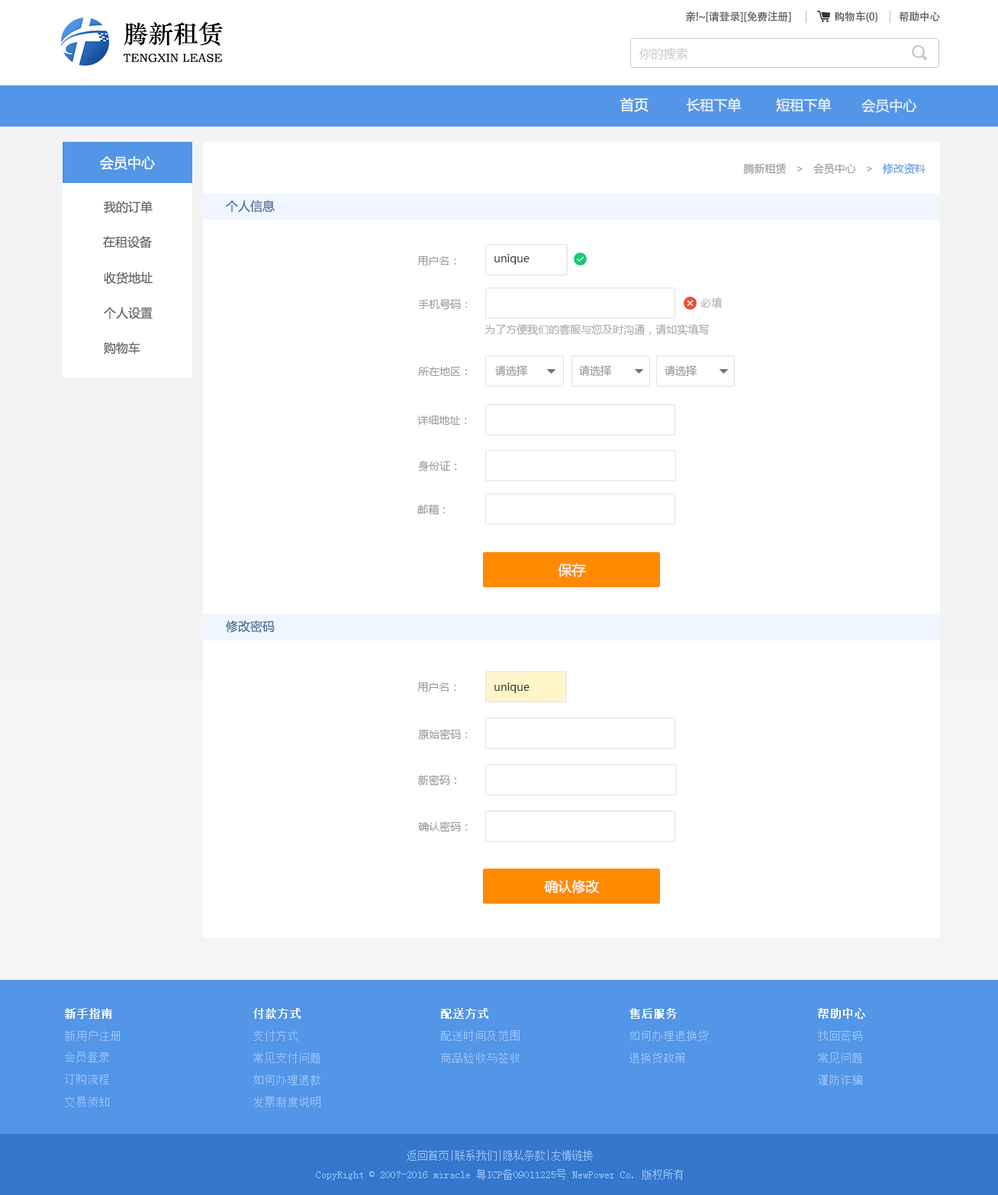
<style>
.page{position:relative;width:998px;height:1195px;background:#ffffff}
.page>*{position:absolute;margin:0}
.t1{font:10.7px "AdobeHeitiStd-Regular";letter-spacing:-0.02em;color:#666666}
.t2{font:24.9px "STZhongsong";color:#000000}
.t3{font:11.8px "STZhongsong";color:#000000}
.t4{font:12.2px "MicrosoftYaHei";color:#c9caca}
.t5{font:14.3px "MicrosoftYaHei";color:#ffffff}
.t6{font:13.7px "MicrosoftYaHei";color:#eaf3ff}
.t7{font:13.7px "MicrosoftYaHei";color:#fefefe}
.t8{font:10.7px "MicrosoftYaHei";color:#999999}
.t9{font:10.7px "MicrosoftYaHei";color:#5395e7}
.t10{font:12.2px "MicrosoftYaHei";color:#666666}
.t11{font:12.2px "MicrosoftYaHei";color:#4d719d}
.t12{font:10.7px "MicrosoftYaHei";color:#333333}
.t13{font:10.7px "MicrosoftYaHei";color:#aaaaaa}
.t14{font:13.7px "MicrosoftYaHei";color:#fffefe}
.t15{font:11.4px "SimSun";color:#ffffff;font-weight:bold}
.t16{font:11.4px "SimSun";color:#9ec8fd}
.t17{font:10.7px "SimSun";color:#9ec8fd}
</style>
<div class="page">
<p class="t1" style="left:686px;top:11px;width:105px;height:11px">亲!~[请登录][免费注册]</p>
<p class="t1" style="left:834px;top:11px;width:43px;height:11px">购物车(0)</p>
<p class="t1" style="left:899px;top:11px;width:41px;height:11px">帮助中心</p>
<p class="t2" style="left:124px;top:21px;width:99px;height:25px">腾新租赁</p>
<p class="t3" style="left:123px;top:53px;width:100px;height:10px">TENGXIN LEASE</p>
<p class="t4" style="left:638px;top:47px;width:50px;height:12px">你的搜索</p>
<p class="t5" style="left:619px;top:98px;width:29px;height:14px">首页</p>
<p class="t6" style="left:686px;top:98px;width:55px;height:14px">长租下单</p>
<p class="t6" style="left:776px;top:98px;width:55px;height:14px">短租下单</p>
<p class="t6" style="left:861px;top:98px;width:56px;height:15px">会员中心</p>
<p class="t7" style="left:100px;top:156px;width:55px;height:14px">会员中心</p>
<p class="t8" style="left:743px;top:163px;width:182px;height:12px">腾新租赁   &gt;   会员中心   &gt;   <span class="t9">修改资料</span></p>
<p class="t10" style="left:104px;top:201px;width:49px;height:13px">我的订单</p>
<p class="t11" style="left:226px;top:200px;width:49px;height:13px">个人信息</p>
<p class="t10" style="left:103px;top:236px;width:49px;height:13px">在租设备</p>
<p class="t8" style="left:417px;top:256px;width:39px;height:9px">用户名：</p>
<p class="t12" style="left:494px;top:254px;width:35px;height:11px">unique</p>
<p class="t10" style="left:104px;top:272px;width:49px;height:13px">收货地址</p>
<p class="t8" style="left:418px;top:299px;width:50px;height:11px">手机号码：</p>
<p class="t13" style="left:700px;top:297px;width:22px;height:11px">必填</p>
<p class="t10" style="left:104px;top:307px;width:49px;height:13px">个人设置</p>
<p class="t13" style="left:484px;top:324px;width:225px;height:12px">为了方便我们的客服与您及时沟通，请如实填写</p>
<p class="t10" style="left:104px;top:342px;width:36px;height:13px">购物车</p>
<p class="t8" style="left:495px;top:365px;width:33px;height:11px">请选择</p>
<p class="t8" style="left:579px;top:365px;width:33px;height:11px">请选择</p>
<p class="t8" style="left:664px;top:365px;width:33px;height:11px">请选择</p>
<p class="t8" style="left:418px;top:367px;width:49px;height:9px">所在地区：</p>
<p class="t8" style="left:417px;top:416px;width:50px;height:9px">详细地址：</p>
<p class="t8" style="left:418px;top:461px;width:39px;height:11px">身份证：</p>
<p class="t8" style="left:418px;top:504px;width:27px;height:11px">邮箱：</p>
<p class="t14" style="left:558px;top:563px;width:28px;height:14px">保存</p>
<p class="t11" style="left:226px;top:620px;width:49px;height:13px">修改密码</p>
<p class="t8" style="left:417px;top:683px;width:39px;height:9px">用户名：</p>
<p class="t12" style="left:494px;top:683px;width:35px;height:10px">unique</p>
<p class="t8" style="left:418px;top:729px;width:50px;height:11px">原始密码：</p>
<p class="t8" style="left:418px;top:775px;width:38px;height:11px">新密码：</p>
<p class="t8" style="left:418px;top:821px;width:50px;height:11px">确认密码：</p>
<p class="t14" style="left:544px;top:879px;width:56px;height:15px">确认修改</p>
<p class="t15" style="left:65px;top:1008px;width:47px;height:11px">新手指南</p>
<p class="t15" style="left:253px;top:1008px;width:48px;height:11px">付款方式</p>
<p class="t15" style="left:441px;top:1008px;width:47px;height:11px">配送方式</p>
<p class="t15" style="left:629px;top:1008px;width:48px;height:11px">售后服务</p>
<p class="t15" style="left:818px;top:1008px;width:47px;height:11px">帮助中心</p>
<p class="t16" style="left:65px;top:1030px;width:56px;height:11px">新用户注册</p>
<p class="t16" style="left:253px;top:1030px;width:44px;height:11px">支付方式</p>
<p class="t16" style="left:441px;top:1030px;width:78px;height:11px">配送时间及范围</p>
<p class="t16" style="left:629px;top:1030px;width:79px;height:11px">如何办理退换货</p>
<p class="t16" style="left:818px;top:1030px;width:44px;height:11px">找回密码</p>
<p class="t16" style="left:65px;top:1052px;width:44px;height:11px">会员登录</p>
<p class="t16" style="left:253px;top:1053px;width:67px;height:10px">常见支付问题</p>
<p class="t16" style="left:441px;top:1053px;width:78px;height:10px">商品验收与签收</p>
<p class="t16" style="left:629px;top:1053px;width:56px;height:10px">退换货政策</p>
<p class="t16" style="left:818px;top:1053px;width:44px;height:10px">常见问题</p>
<p class="t16" style="left:65px;top:1074px;width:44px;height:11px">订购流程</p>
<p class="t16" style="left:253px;top:1075px;width:67px;height:10px">如何办理退款</p>
<p class="t16" style="left:818px;top:1075px;width:44px;height:10px">谨防诈骗</p>
<p class="t16" style="left:65px;top:1097px;width:44px;height:11px">交易须知</p>
<p class="t16" style="left:253px;top:1097px;width:67px;height:11px">发票制度说明</p>
<p class="t17" style="left:316px;top:1150px;width:367px;height:30px;text-align:center">返回首页|联系我们|隐私条款|友情链接<br>CopyRight © 2007-2016 miracle 粤ICP备09011225号 NewPower Co. 版权所有</p>
</div>
